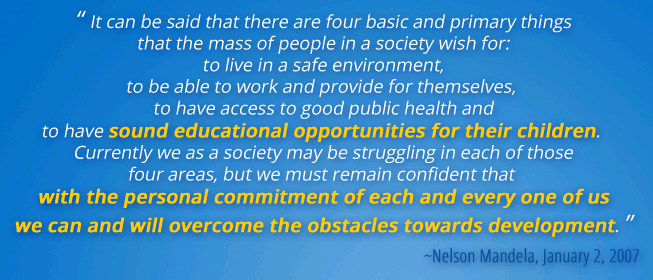
<style>
.page{position:relative;width:653px;height:280px}
.page>*{position:absolute;margin:0}
.t1{font:18px "OpenSans";color:#ffffff;font-style:italic}
.t2{font:24px "OpenSans";color:#ffffff;font-style:italic}
.t3{font:19px "OpenSans-Semibold";color:#ffcb08;font-weight:bold;font-style:italic}
.t4{font:18px "OpenSans-CondensedLight";color:#08519c;font-weight:bold}
</style>
<div class="page">
<p class="t1" style="left:15px;top:10px;width:620px;height:227px;text-align:center"><span class="t2">“ </span>It can be said that there are four basic and primary things<br>that the mass of people in a society wish for:<br>to live in a safe environment,<br>to be able to work and provide for themselves, <br>to have access to good public health and<br>to have <span class="t3">sound educational opportunities for their children</span>. <br>Currently we as a society may be struggling in each of those<br>four areas, but we must remain confident that <br><span class="t3">with the personal commitment of each and every one of us<br>we can and will overcome the obstacles towards development</span>. <span class="t2">”</span></p>
<p class="t4" style="left:424px;top:248px;width:215px;height:19px">~Nelson Mandela, January 2, 2007</p>
</div>
